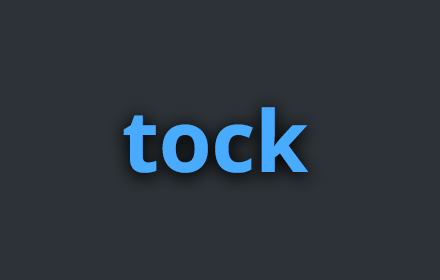
<style>
.page{position:relative;width:440px;height:280px;background:#2c3237}
.page>*{position:absolute;margin:0}
.t1{font:85px "OpenSans-Bold";color:#49abff}
</style>
<div class="page">
<p class="t1" style="left:123px;top:107px;width:185px;height:66px">tock</p>
</div>
